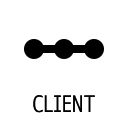
<style>
.page{position:relative;width:128px;height:128px;background:#ffffff}
.page>*{position:absolute;margin:0}
.t1{font:24px "MonoSpatial";color:#000000}
</style>
<div class="page">
<p class="t1" style="left:33px;top:95px;width:62px;height:18px">CLIENT</p>
</div>
